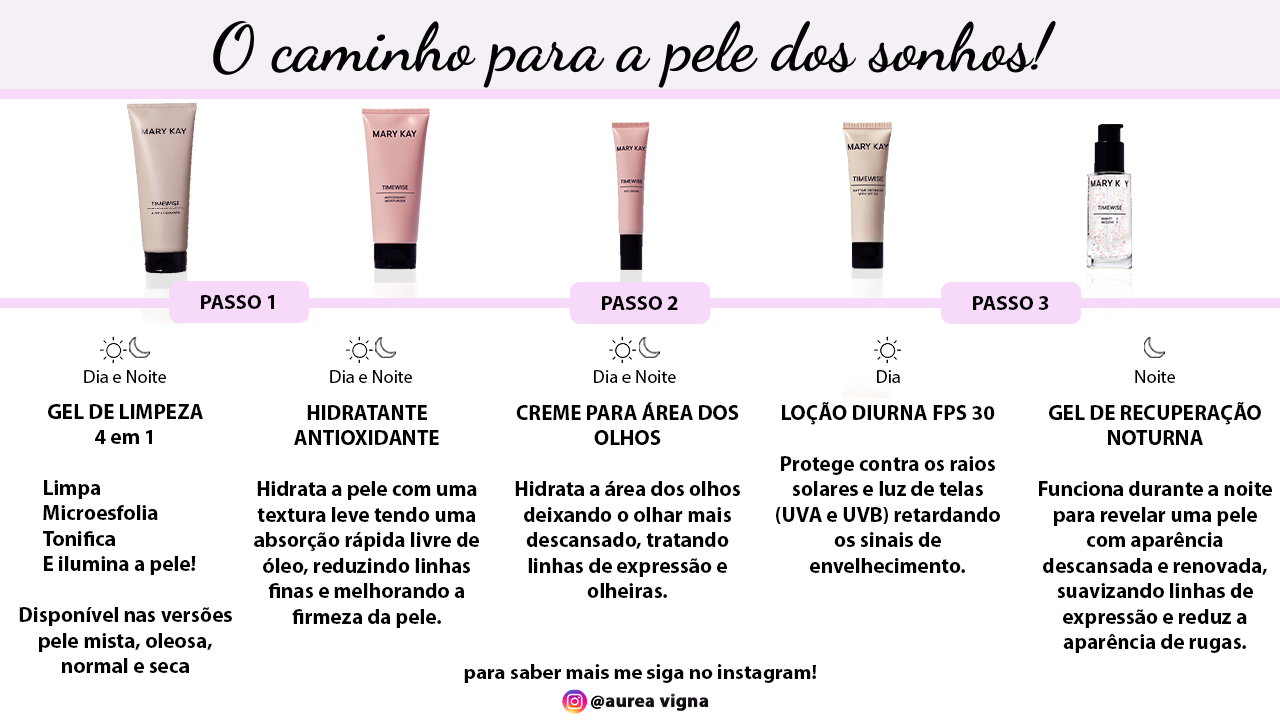
<style>
.page{position:relative;width:1280px;height:720px;background:#ffffff}
.page>*{position:absolute;margin:0}
.t1{font:66.7px "DancingScript-Bold";color:#000000}
.t2{font:20.8px "MyriadPro-Bold";color:#000000}
.t3{font:18.3px "MyriadPro-Regular";color:#000000}
.t4{font:21.2px "MyriadPro-Bold";color:#000000}
</style>
<div class="page">
<p class="t1" style="left:213px;top:21px;width:843px;height:67px">O caminho para a pele dos sonhos!</p>
<p class="t2" style="left:201px;top:295px;width:73px;height:14px">PASSO 1</p>
<p class="t2" style="left:602px;top:296px;width:76px;height:14px">PASSO 2</p>
<p class="t2" style="left:973px;top:296px;width:76px;height:14px">PASSO 3</p>
<p class="t3" style="left:84px;top:370px;width:82px;height:13px">Dia e Noite</p>
<p class="t3" style="left:330px;top:370px;width:82px;height:13px">Dia e Noite</p>
<p class="t3" style="left:594px;top:370px;width:82px;height:13px">Dia e Noite</p>
<p class="t3" style="left:877px;top:370px;width:23px;height:13px">Dia</p>
<p class="t3" style="left:1135px;top:370px;width:40px;height:13px">Noite</p>
<p class="t4" style="left:19px;top:404px;width:213px;height:269px;text-align:center">GEL DE LIMPEZA <br>4 em 1<br><br> Limpa<br> Microesfolia<br> Tonifica<br>  E ilumina a pele!<br><br>Disponível nas versões<br>pele mista, oleosa, normal e seca</p>
<p class="t4" style="left:254px;top:405px;width:225px;height:223px;text-align:center">HIDRATANTE ANTIOXIDANTE<br><br>Hidrata a pele com uma textura leve tendo uma absorção rápida livre de óleo, reduzindo linhas finas e melhorando a firmeza da pele.</p>
<p class="t4" style="left:515px;top:402px;width:225px;height:196px;text-align:center">CREME PARA ÁREA DOS OLHOS<br><br>Hidrata a área dos olhos deixando o olhar mais descansado, tratando linhas de expressão e olheiras.</p>
<p class="t4" style="left:776px;top:402px;width:224px;height:171px;text-align:center">LOÇÃO DIURNA FPS 30<br><br>Protege contra os raios solares e luz de telas (UVA e UVB) retardando os sinais de envelhecimento.</p>
<p class="t4" style="left:1039px;top:402px;width:233px;height:251px;text-align:center">GEL DE RECUPERAÇÃO NOTURNA<br><br>Funciona durante a noite para revelar uma pele com aparência descansada e renovada, suavizando linhas de expressão e reduz a aparência de rugas.</p>
<p class="t2" style="left:464px;top:664px;width:352px;height:19px">para saber mais me siga no instagram!</p>
</div>
